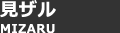
<style>
.page{position:relative;width:120px;height:33px;background:#333333}
.page>*{position:absolute;margin:0}
.t1{font:18px "Meiryo-Bold";letter-spacing:0.05em;color:#ffffff}
.t2{font:12px "Meiryo-Bold";letter-spacing:0.05em;color:#ffffff}
</style>
<div class="page">
<p class="t1" style="left:0px;top:0px;width:56px;height:18px">見ザル</p>
<p class="t2" style="left:1px;top:24px;width:54px;height:10px">MIZARU</p>
</div>
